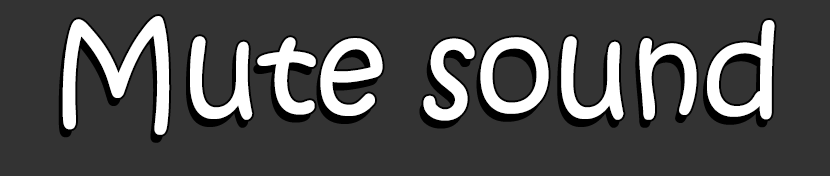
<style>
.page{position:relative;width:830px;height:176px;background:#333333}
.page>*{position:absolute;margin:0}
.t1{font:124.4px "KristenITC-Regular";color:#ffffff}
</style>
<div class="page">
<p class="t1" style="left:62px;top:16px;width:713px;height:119px">Mute sound</p>
</div>
